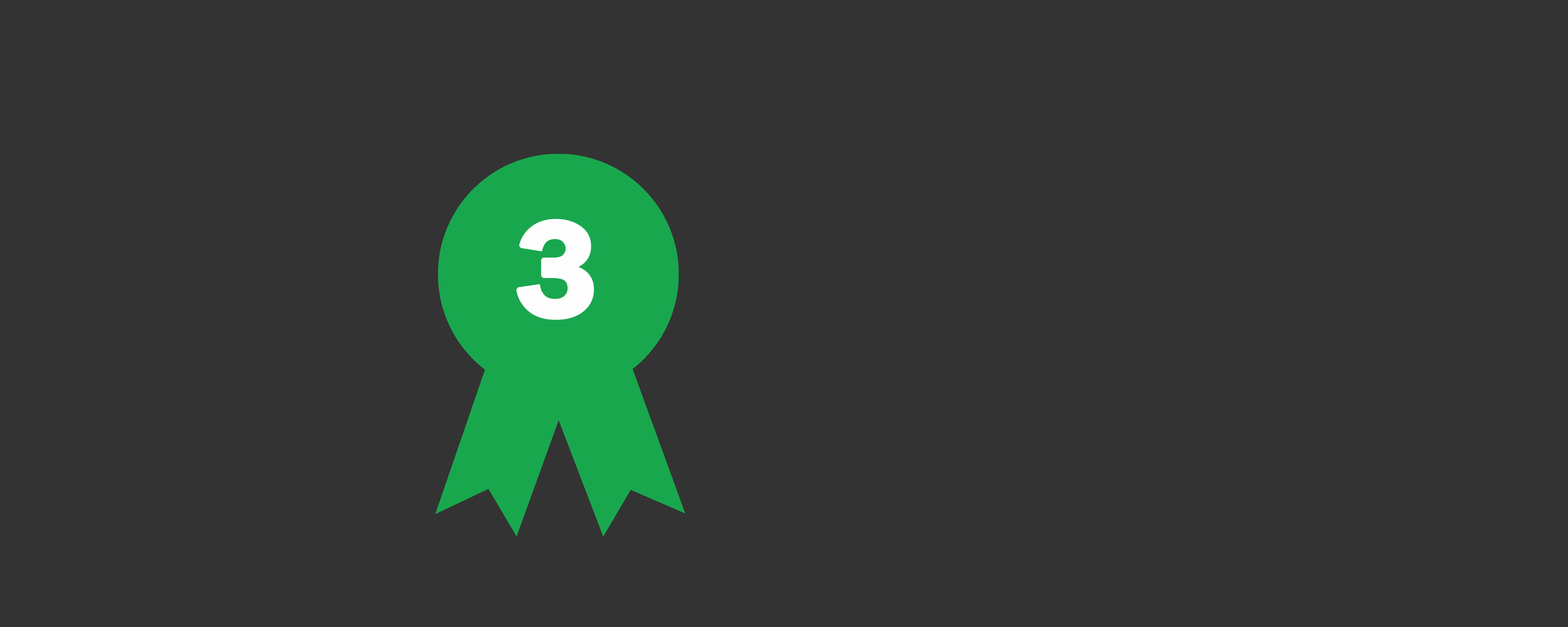
<style>
.page{position:relative;width:1568px;height:627px;background:#333333}
.page>*{position:absolute;margin:0}
.t1{font:141.1px "FranklinGothic-Demi";color:#fefeff;font-weight:bold}
</style>
<div class="page">
<p class="t1" style="left:516px;top:219px;width:78px;height:101px">3</p>
</div>
